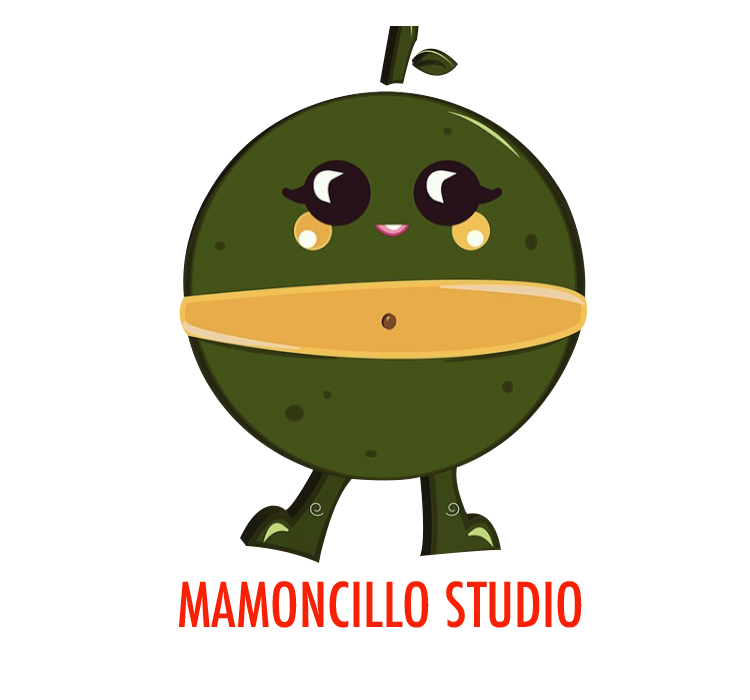
<style>
.page{position:relative;width:750px;height:700px;background:#ffffff}
.page>*{position:absolute;margin:0}
.t1{font:60px "Futura-CondensedMedium";color:#f82105}
</style>
<div class="page">
<p class="t1" style="left:179px;top:581px;width:403px;height:47px">MAMONCILLO STUDIO</p>
</div>
